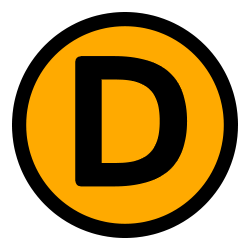
<style>
.page{position:relative;width:250px;height:250px;background:#ffffff}
.page>*{position:absolute;margin:0}
.t1{font:165.4px "Kalimati";color:#000000}
</style>
<div class="page">
<p class="t1" style="left:80px;top:61px;width:103px;height:121px">D</p>
</div>
